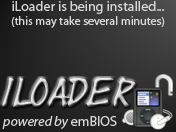
<style>
.page{position:relative;width:176px;height:132px}
.page>*{position:absolute;margin:0}
.t1{font:12px "MyriadPro-Regular";color:#d8d8d8}
.t2{font:14px "MyriadPro-Regular";color:#d8d8d8}
.t3{font:30px "Yearsupplyoffairycakes"}
.t4{font:14px "MyriadPro-It";color:#d8d8d8}
</style>
<div class="page">
<p class="t1" style="left:11px;top:1px;width:154px;height:27px;text-align:center"><span class="t2">iLoader is being installed...<br></span>(this may take several minutes)</p>
<p class="t3" style="left:2px;top:78px;width:134px;height:29px">iLoader</p>
<p class="t4" style="left:2px;top:116px;width:115px;height:13px">powered by<span class="t2"> emBIOS</span></p>
</div>
